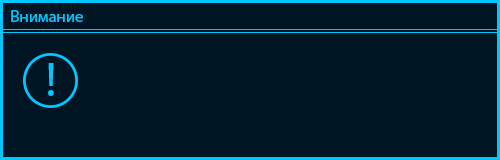
<style>
.page{position:relative;width:500px;height:160px;background:#001523}
.page>*{position:absolute;margin:0}
.t1{font:16.7px "MyriadPro-Regular";color:#00c7ff}
.t2{font:48.6px "MyriadPro-Regular";color:#00c8ff}
</style>
<div class="page">
<p class="t1" style="left:11px;top:10px;width:72px;height:12px">Внимание</p>
<p class="t2" style="left:48px;top:63px;width:6px;height:33px">!</p>
</div>
